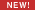
<style>
.page{position:relative;width:35px;height:10px;background:#c52e2e}
.page>*{position:absolute;margin:0}
.t1{font:8px "Helvetica-Bold";letter-spacing:0.075em;color:#fdfdfd}
</style>
<div class="page">
<p class="t1" style="left:7px;top:2px;width:22px;height:6px">NEW!</p>
</div>
